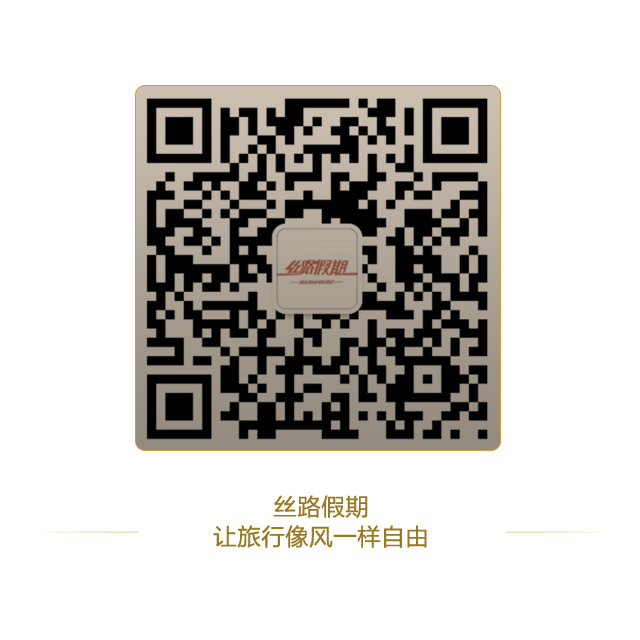
<style>
.page{position:relative;width:640px;height:640px;background:#ffffff}
.page>*{position:absolute;margin:0}
.t1{font:24px/30px "FZLTHK--GBK1-0";color:#997a20}
</style>
<div class="page">
<p class="t1" style="left:213px;top:495px;width:214px;height:53px;text-align:center">丝路假期<br>让旅行像风一样自由</p>
</div>
